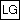
<style>
.page{position:relative;width:20px;height:20px;background:#ffffff}
.page>*{position:absolute;margin:0}
.t1{font:12px "Helvetica";color:#000000}
</style>
<div class="page">
<p class="t1" style="left:3px;top:5px;width:14px;height:9px">LG</p>
</div>
